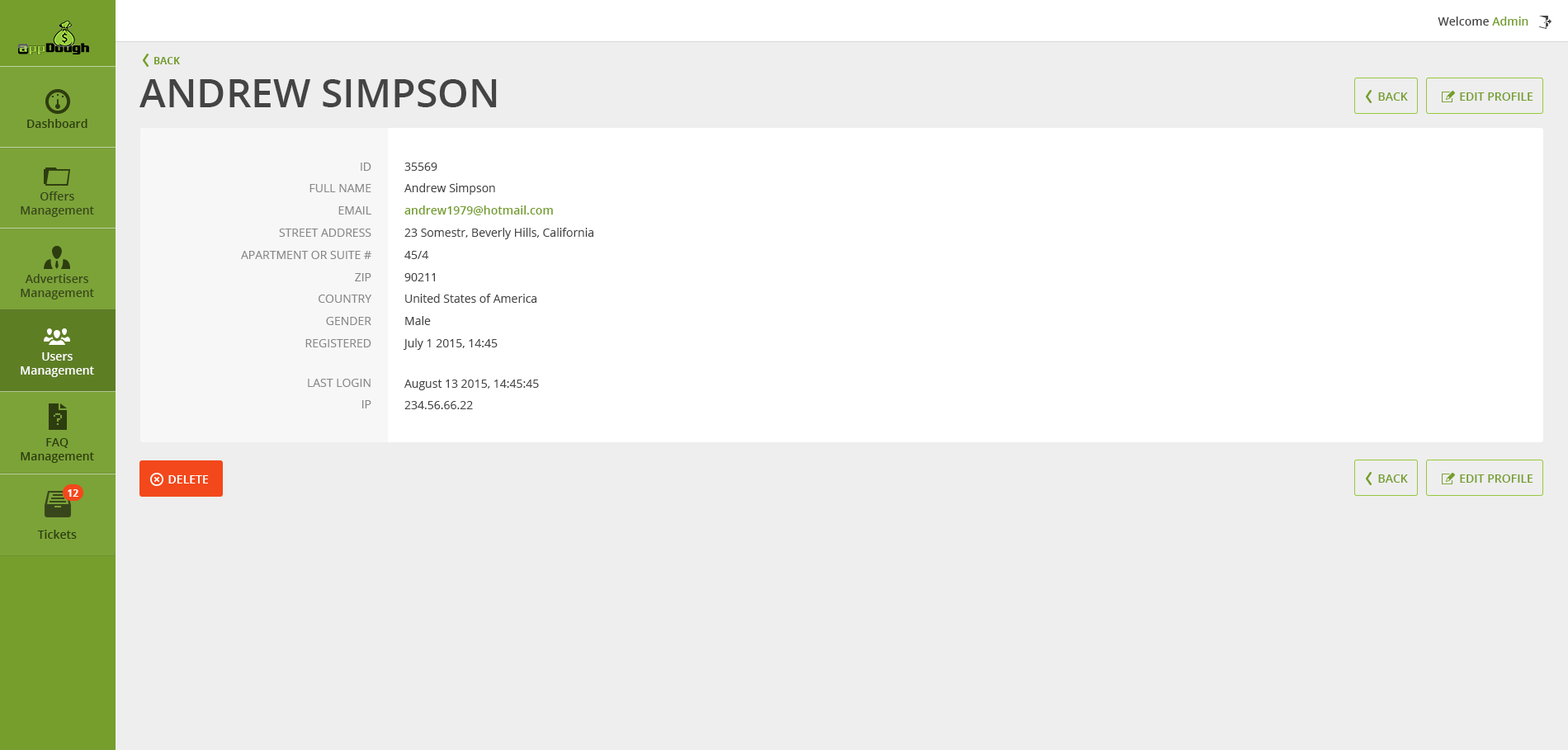
<style>
.page{position:relative;width:1568px;height:750px;background:#eeeeee}
.page>*{position:absolute;margin:0}
.t1{font:11.6px "OpenSans-Semibold";color:#444444}
.t2{font:11.6px "OpenSans-Semibold";color:#759e2d}
.t3{font:9.9px "OpenSans-Bold";color:#759e2d;text-transform:uppercase}
.t4{font:39.6px "OpenSans-Semibold";color:#444444;text-transform:uppercase}
.t5{font:11.6px "OpenSans-Semibold";color:#759e2d;text-transform:uppercase}
.t6{font:11.6px "OpenSans-Semibold";color:#2d3d0f}
.t7{font:11.6px "OpenSans";color:#888888;text-transform:uppercase}
.t8{font:11.6px "OpenSans";color:#444444}
.t9{font:11.6px "OpenSans-Semibold";color:#fffffe}
.t10{font:11.6px "OpenSans-Semibold";color:#ffffff;text-transform:uppercase}
.t11{font:9.9px "OpenSans-Bold";color:#ffffff}
</style>
<div class="page">
<p class="t1" style="left:1438px;top:17px;width:90px;height:9px">Welcome <span class="t2">Admin</span></p>
<p class="t3" style="left:154px;top:57px;width:26px;height:7px">Back</p>
<p class="t4" style="left:139px;top:79px;width:358px;height:28px">Andrew Simpson</p>
<p class="t5" style="left:1378px;top:92px;width:30px;height:9px">Back</p>
<p class="t5" style="left:1460px;top:92px;width:73px;height:9px">Edit Profile</p>
<p class="t6" style="left:27px;top:119px;width:60px;height:9px">Dashboard</p>
<p class="t7" style="left:241px;top:163px;width:131px;height:184px;text-align:right">ID<br>Full Name<br>Email<br>Street Address<br>Apartment or Suite #<br>Zip<br>Country<br>Gender<br>registered</p>
<p class="t8" style="left:403px;top:163px;width:190px;height:187px">35569<br>Andrew Simpson<br><span class="t2">andrew1979@hotmail.com<br></span>23 Somestr, Beverly Hills, California<br>45/4<br>90211<br>United States of America<br>Male<br>July 1 2015, 14:45</p>
<p class="t6" style="left:21px;top:191px;width:73px;height:26px;text-align:center">Offers Management</p>
<p class="t6" style="left:21px;top:274px;width:73px;height:26px;text-align:center">Advertisers Management</p>
<p class="t9" style="left:21px;top:352px;width:73px;height:25px;text-align:center">Users Management</p>
<p class="t7" style="left:308px;top:379px;width:63px;height:30px;text-align:right">Last Login<br>IP</p>
<p class="t8" style="left:404px;top:380px;width:135px;height:29px">August 13 2015, 14:45:45<br>234.56.66.22</p>
<p class="t6" style="left:21px;top:438px;width:73px;height:25px;text-align:center">FAQ Management</p>
<p class="t10" style="left:168px;top:475px;width:41px;height:9px">Delete</p>
<p class="t5" style="left:1378px;top:475px;width:30px;height:8px">Back</p>
<p class="t5" style="left:1460px;top:475px;width:73px;height:8px">Edit Profile</p>
<p class="t11" style="left:68px;top:489px;width:10px;height:8px">12</p>
<p class="t6" style="left:37px;top:530px;width:40px;height:9px">Tickets</p>
</div>
